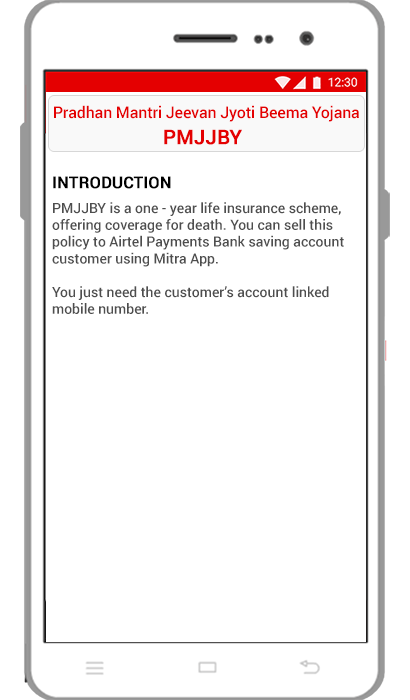
<style>
.page{position:relative;width:410px;height:700px;background:#ffffff}
.page>*{position:absolute;margin:0}
.t1{font:16px "Roboto-Medium";letter-spacing:-0.01em;color:#e40001}
.t2{font:20px "Roboto-Medium";letter-spacing:-0.01em;color:#e40001;font-weight:bold}
.t3{font:16px "Roboto-Medium";color:#000000;font-weight:bold}
.t4{font:14px "Roboto-Medium";color:#4e4e4e}
</style>
<div class="page">
<p class="t1" style="left:54px;top:105px;width:305px;height:17px">Pradhan Mantri Jeevan Jyoti Beema Yojana</p>
<p class="t2" style="left:164px;top:129px;width:78px;height:16px">PMJJBY</p>
<p class="t3" style="left:53px;top:176px;width:118px;height:13px">INTRODUCTION</p>
<p class="t4" style="left:52px;top:202px;width:292px;height:112px">PMJJBY is a one - year life insurance scheme, <br>offering coverage for death. You can sell this <br>policy to Airtel Payments Bank saving account<br>customer using Mitra App. <br><br>You just need the customer’s account linked <br>mobile number.</p>
</div>
